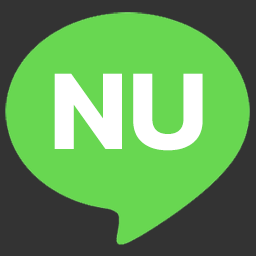
<style>
.page{position:relative;width:256px;height:256px;background:#68d751}
.page>*{position:absolute;margin:0}
.t1{font:116.7px "Kanit-SemiBold";color:#ffffff}
</style>
<div class="page">
<p class="t1" style="left:54px;top:73px;width:149px;height:78px">NU</p>
</div>
